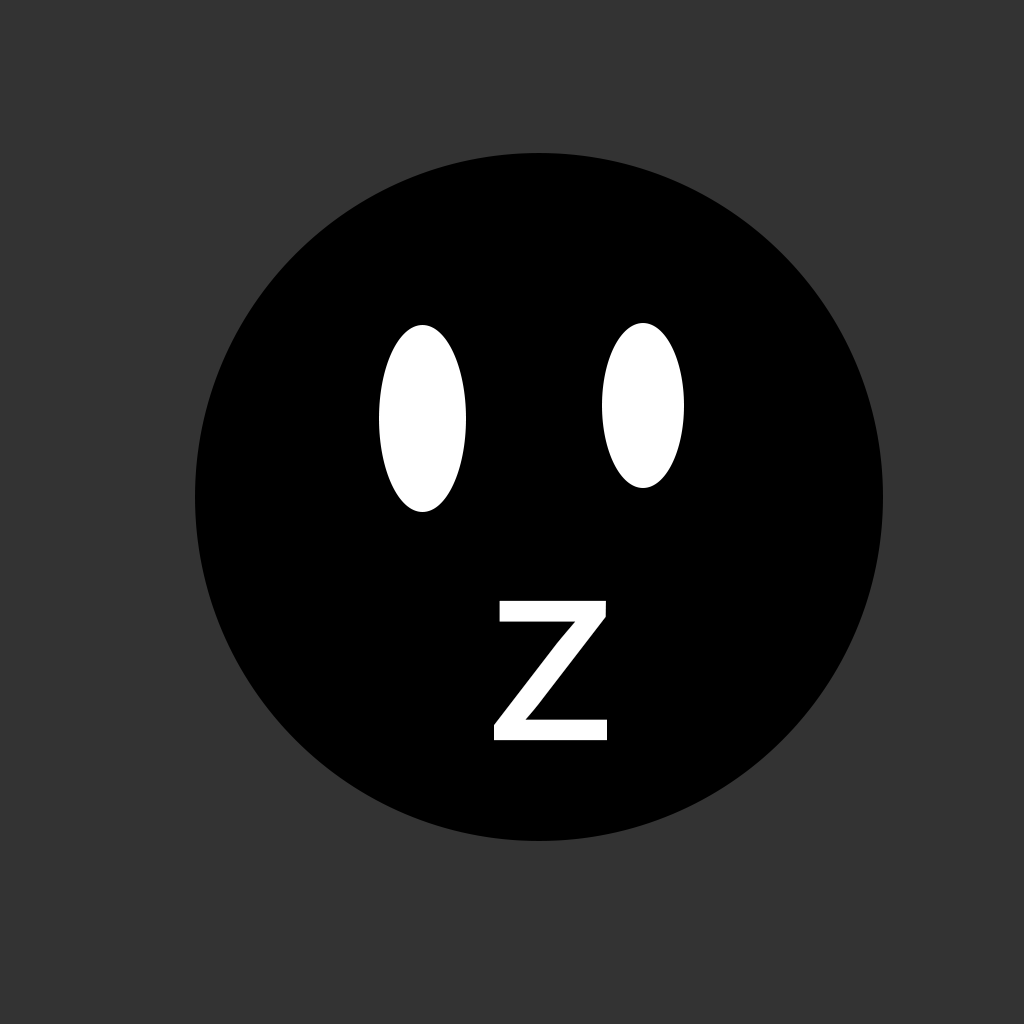
<style>
.page{position:relative;width:1024px;height:1024px;background:#333333}
.page>*{position:absolute;margin:0}
.t1{font:287.5px "MyriadPro-Regular";color:#ffffff}
</style>
<div class="page">
<p class="t1" style="left:494px;top:600px;width:113px;height:141px">z</p>
</div>
